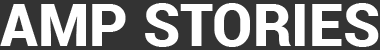
<style>
.page{position:relative;width:380px;height:50px;background:#333333}
.page>*{position:absolute;margin:0}
.t1{font:59px "Roboto-Black";color:#ffffff}
</style>
<div class="page">
<p class="t1" style="left:0px;top:3px;width:379px;height:44px">AMP STORIES</p>
</div>
